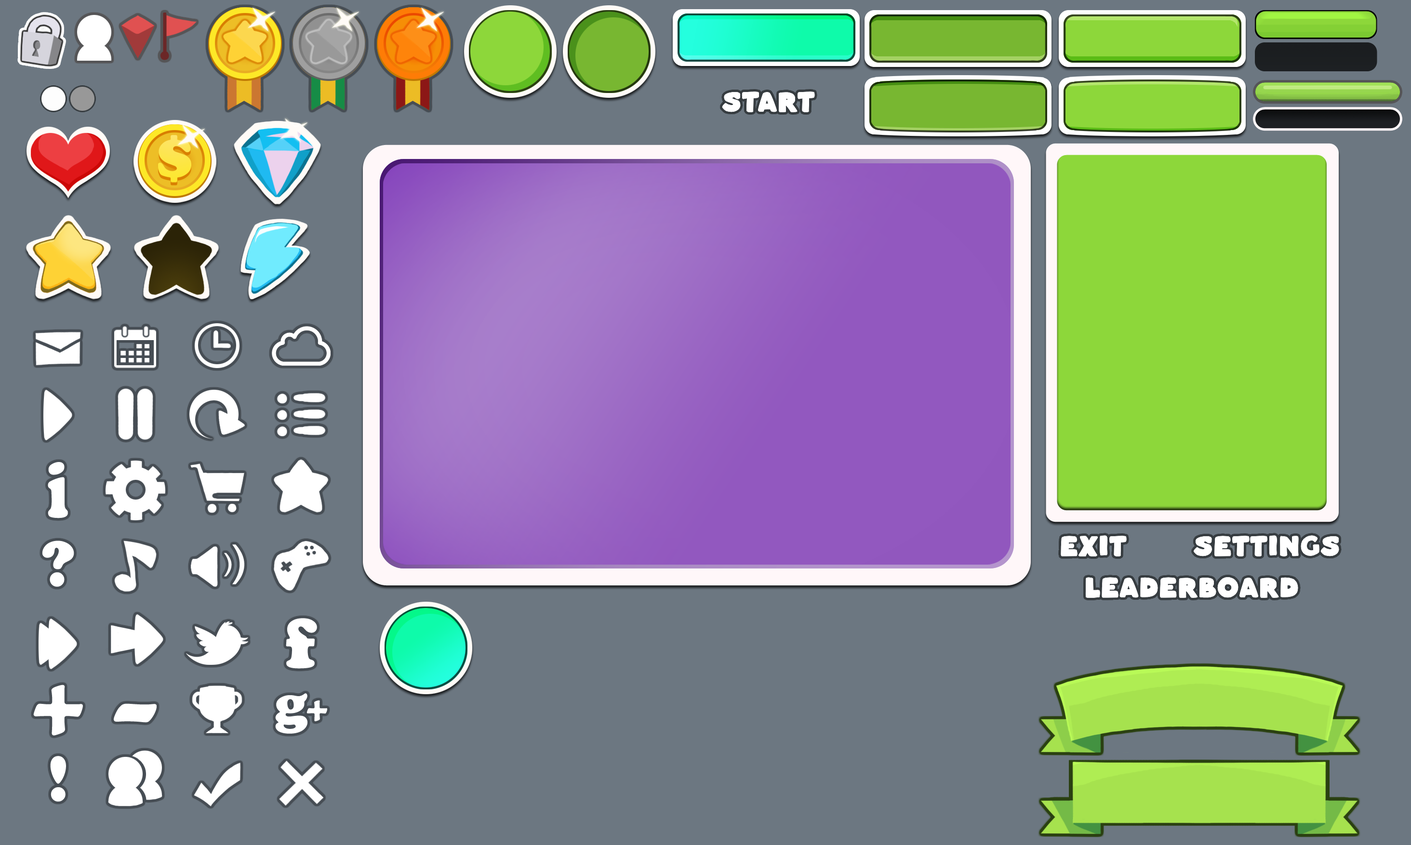
<style>
.page{position:relative;width:1411px;height:845px;background:#6c7781}
.page>*{position:absolute;margin:0}
.t1{font:28.9px "MasaBooRegular";color:#ffffff}
.t2{font:82.6px "CooperBlack";color:#ffffff;scale:0.71 1}
.t3{font:67.5px "CooperBlack";color:#ffffff}
.t4{font:73.4px "CooperBlack";letter-spacing:0.025em;color:#ffffff}
.t5{font:102.2px "CooperBlack";letter-spacing:0.025em;color:#ffffff}
.t6{font:102.2px "CooperBlack";letter-spacing:0.025em;color:#ffffff;scale:1.47 1}
</style>
<div class="page">
<p class="t1" style="left:722px;top:92px;width:93px;height:20px">Start</p>
<p class="t2" style="left:48px;top:462px;width:20px;height:56px">i</p>
<p class="t3" style="left:42px;top:541px;width:32px;height:46px">?</p>
<p class="t1" style="left:1061px;top:535px;width:66px;height:22px">Exit</p>
<p class="t1" style="left:1194px;top:535px;width:145px;height:22px">Settings</p>
<p class="t1" style="left:1085px;top:577px;width:213px;height:21px">Leaderboard</p>
<p class="t4" style="left:286px;top:618px;width:31px;height:51px">f</p>
<p class="t5" style="left:33px;top:685px;width:50px;height:51px">+</p>
<p class="t6" style="left:114px;top:704px;width:43px;height:19px">-</p>
<p class="t3" style="left:50px;top:756px;width:16px;height:46px">!</p>
</div>
